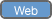
<style>
.page{position:relative;width:52px;height:19px;background:#6699cc}
.page>*{position:absolute;margin:0}
.t1{font:12px "HelveticaNeue";color:#ffffff}
</style>
<div class="page">
<p class="t1" style="left:14px;top:6px;width:24px;height:9px">Web</p>
</div>
